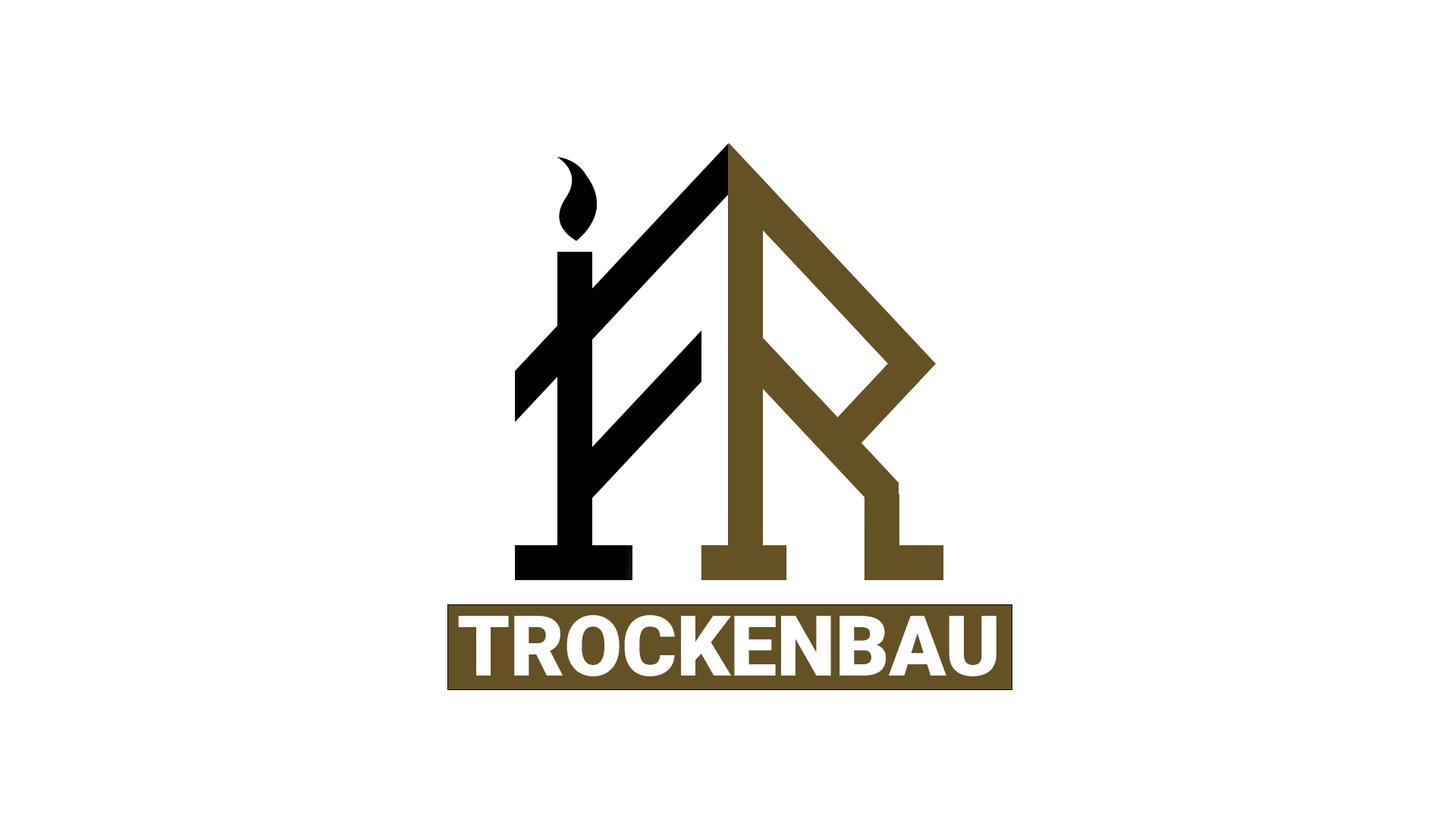
<style>
.page{position:relative;width:1456px;height:819px;background:#ffffff}
.page>*{position:absolute;margin:0}
.t1{font:83.4px "Roboto-Black";color:#ffffff}
</style>
<div class="page">
<p class="t1" style="left:458px;top:615px;width:538px;height:61px">TROCKENBAU</p>
</div>
